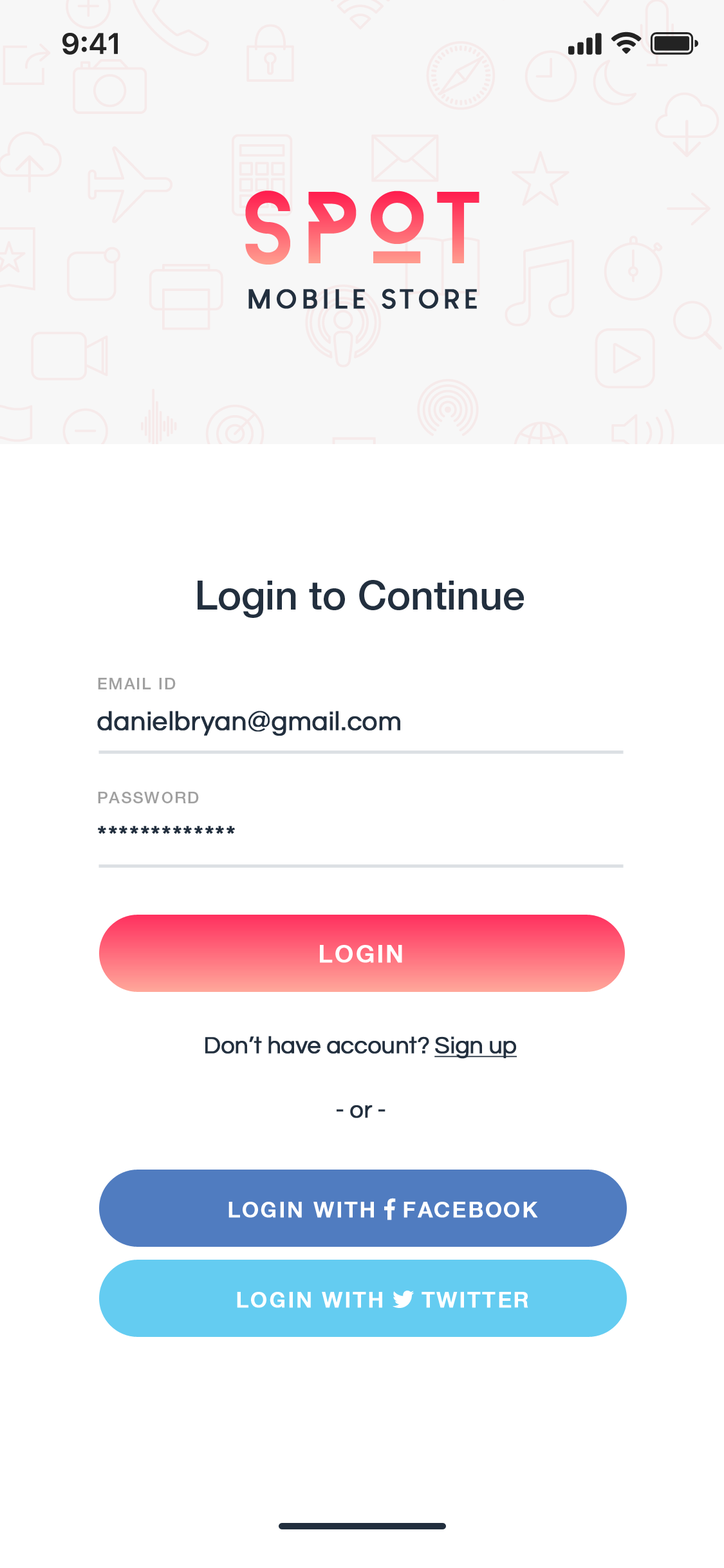
<style>
.page{position:relative;width:724px;height:1568px;background:#ffffff}
.page>*{position:absolute;margin:0}
.t1{font:101.9px "BaronNeue";letter-spacing:0.05em}
.t2{font:26.8px "LouisGeorgeCafe-Bold";letter-spacing:0.14em;color:#222f3e;text-transform:uppercase;font-weight:bold}
.t3{font:40.2px "HelveticaNeue-Medium";color:#222f3e}
.t4{font:16.1px "HelveticaNeue-Medium";letter-spacing:0.08em;color:#a0a0a0;text-transform:uppercase}
.t5{font:26.8px "Questrial-Regular";color:#222f3e;font-weight:bold}
.t6{font:24.1px "HelveticaNeue-Medium";letter-spacing:0.08em;color:#ffffff;font-weight:bold}
.t7{font:24.1px "Questrial-Regular";letter-spacing:-0.02em;color:#222f3e;font-weight:bold}
.t8{font:24.1px "Questrial-Regular";letter-spacing:-0.02em;color:#222f3e;font-weight:bold;text-decoration:underline}
</style>
<div class="page">
<p class="t1" style="left:245px;top:191px;width:235px;height:74px">SPOT</p>
<p class="t2" style="left:248px;top:288px;width:229px;height:21px">Mobile STORE</p>
<p class="t3" style="left:198px;top:580px;width:326px;height:38px">Login to Continue</p>
<p class="t4" style="left:98px;top:678px;width:78px;height:11px">Email id</p>
<p class="t5" style="left:97px;top:711px;width:303px;height:25px">danielbryan@gmail.com</p>
<p class="t4" style="left:98px;top:792px;width:101px;height:11px">PASSWORD</p>
<p class="t5" style="left:98px;top:826px;width:137px;height:8px">*************</p>
<p class="t6" style="left:320px;top:945px;width:82px;height:18px">LOGIN</p>
<p class="t7" style="left:205px;top:1036px;width:312px;height:23px">Don’t have account? <span class="t8">Sign up</span></p>
<p class="t7" style="left:337px;top:1105px;width:49px;height:13px">- or -</p>
</div>
